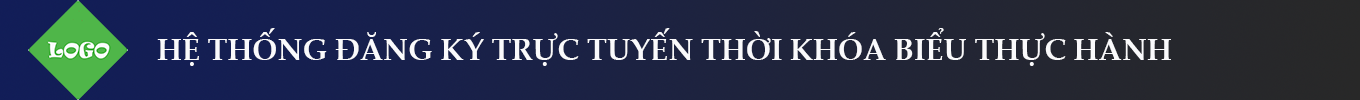
<style>
.page{position:relative;width:1360px;height:100px}
.page>*{position:absolute;margin:0}
.t1{font:30px "PalatinoLinotype-Bold";color:#fafafc}
</style>
<div class="page">
<p class="t1" style="left:157px;top:28px;width:1014px;height:38px">HỆ THỐNG ĐĂNG KÝ TRỰC TUYẾN THỜI KHÓA BIỂU THỰC HÀNH</p>
</div>
